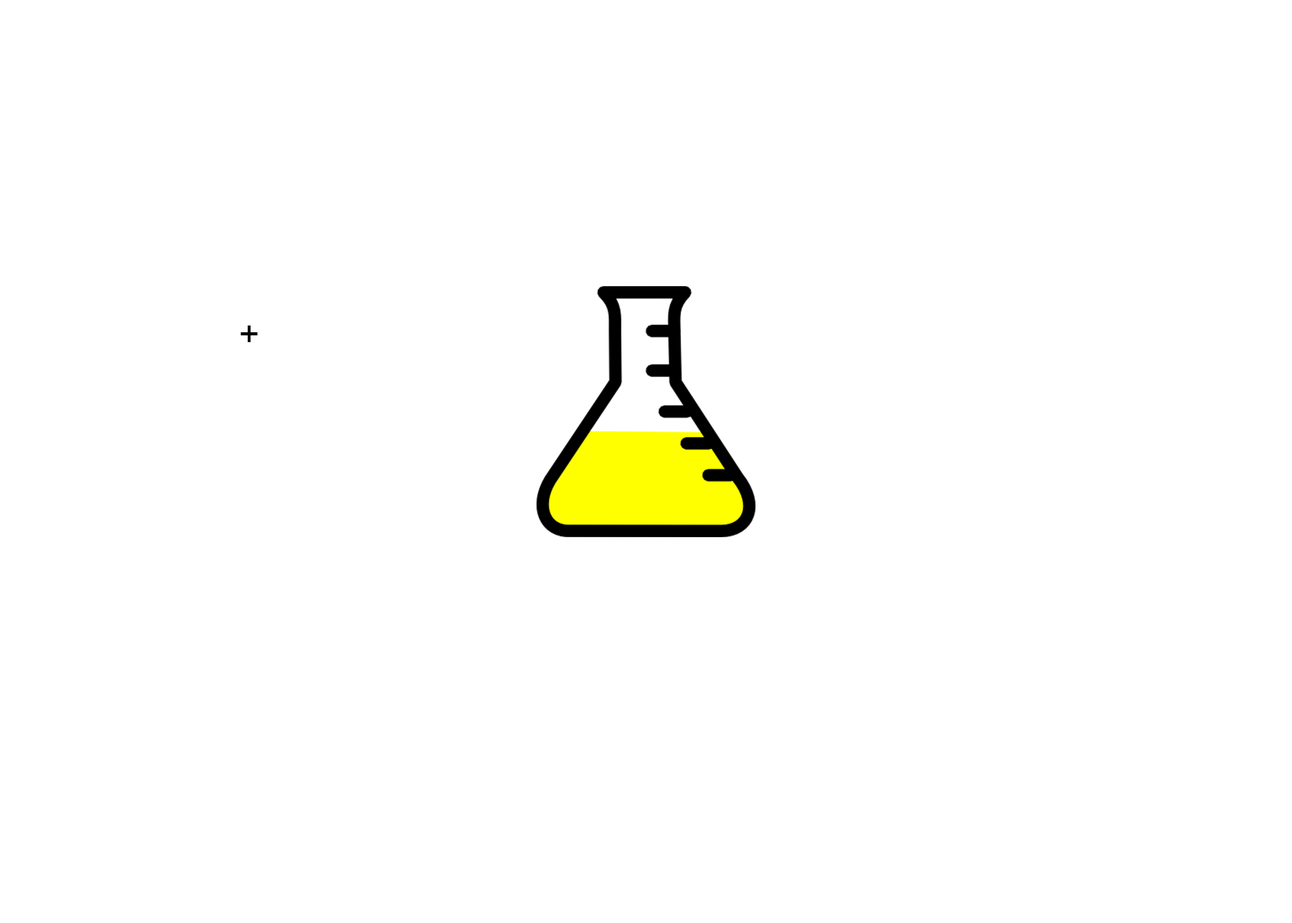
<style>
.page{position:relative;width:1292px;height:923px;background:#ffffff}
.page>*{position:absolute;margin:0}
.t1{font:35.9px "ArialMT";letter-spacing:0.1em;color:#000000;text-transform:uppercase}
</style>
<div class="page">
<p class="t1" style="left:241px;top:325px;width:17px;height:17px">+</p>
</div>
